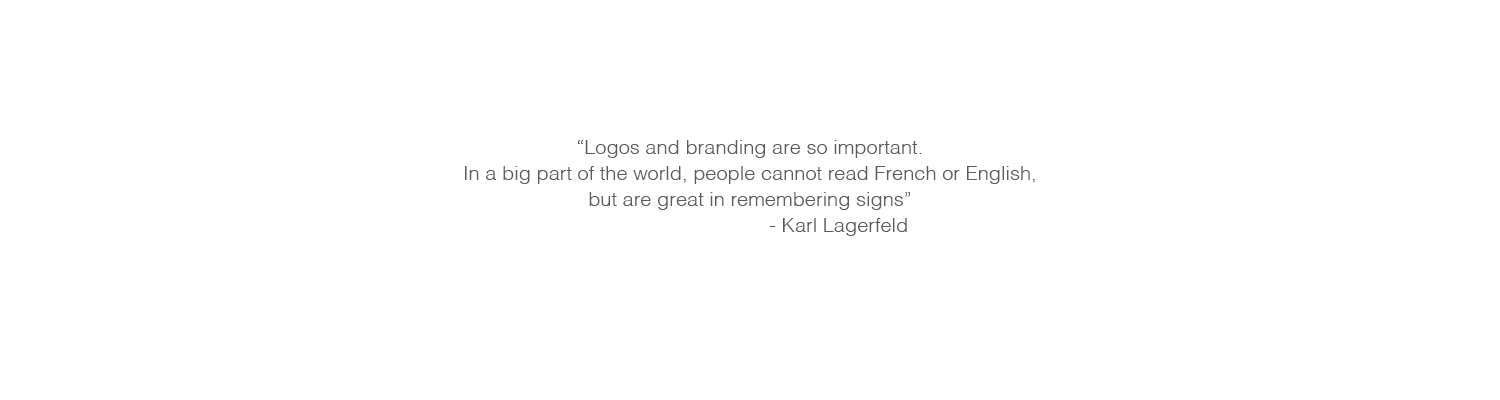
<style>
.page{position:relative;width:1500px;height:400px;background:#ffffff}
.page>*{position:absolute;margin:0}
.t1{font:20px/26px "Helvetica-Light";color:#585b5b}
</style>
<div class="page">
<p class="t1" style="left:465px;top:140px;width:570px;height:96px;text-align:center">“Logos and branding are so important.<br>In a big part of the world, people cannot read French or English,<br>but are great in remembering signs”<br>                                - Karl Lagerfeld</p>
</div>
